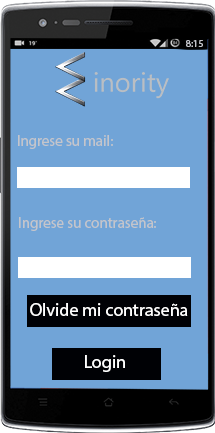
<style>
.page{position:relative;width:215px;height:433px;background:#71a4d7}
.page>*{position:absolute;margin:0}
.t1{font:10px "MyriadPro-Regular";color:#c4c5cb}
.t2{font:15px "MyriadPro-Regular";color:#c4c5cb}
.t3{font:18px "MyriadPro-Regular";color:#ffffff}
</style>
<div class="page">
<p class="t1" style="left:186px;top:40px;width:17px;height:7px">8:15</p>
<p class="t2" style="left:18px;top:135px;width:95px;height:14px">Ingrese su mail:</p>
<p class="t2" style="left:19px;top:217px;width:137px;height:14px">Ingrese su contraseña:</p>
<p class="t3" style="left:30px;top:303px;width:158px;height:13px">Olvide mi contraseña</p>
<p class="t3" style="left:85px;top:355px;width:40px;height:17px">Login</p>
</div>
